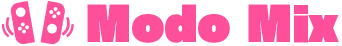
<style>
.page{position:relative;width:342px;height:46px;background:#fe509a}
.page>*{position:absolute;margin:0}
.t1{font:48px "RaglanStd-UB";letter-spacing:-0.012em;color:#fe509a}
</style>
<div class="page">
<p class="t1" style="left:87px;top:4px;width:252px;height:39px">Modo Mix</p>
</div>
